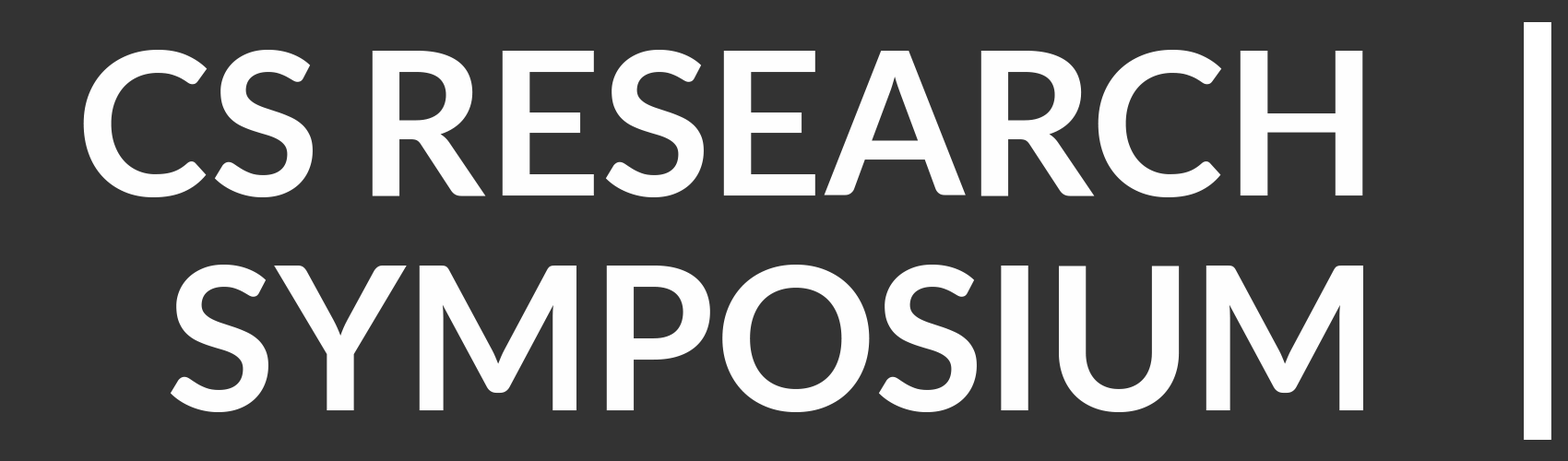
<style>
.page{position:relative;width:1568px;height:461px;background:#333333}
.page>*{position:absolute;margin:0}
.t1{font:199.8px/215.2px "Lato-Bold";color:#fefefe}
</style>
<div class="page">
<p class="t1" style="left:83px;top:50px;width:1280px;height:362px;text-align:right">CS RESEARCH<br>SYMPOSIUM</p>
</div>
